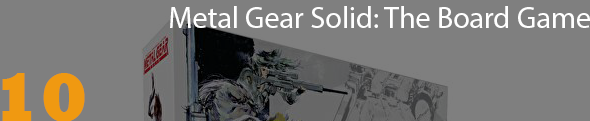
<style>
.page{position:relative;width:590px;height:121px;background:#7f7f7f}
.page>*{position:absolute;margin:0}
.t1{font:30px "MyriadPro-Regular";color:#ffffff}
.t2{font:70px "Rockwell-ExtraBold";color:#f09911}
</style>
<div class="page">
<p class="t1" style="left:170px;top:6px;width:420px;height:22px">Metal Gear Solid: The Board Game</p>
<p class="t2" style="left:2px;top:73px;width:83px;height:49px">10</p>
</div>
